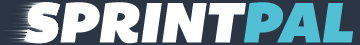
<style>
.page{position:relative;width:360px;height:45px;background:#2b3543}
.page>*{position:absolute;margin:0}
.t1{font:58.1px "BemioItalic";color:#ffffff}
.t2{font:58.1px "BemioItalic";color:#51c0d4}
</style>
<div class="page">
<p class="t1" style="left:24px;top:2px;width:330px;height:42px">SPRINT<span class="t2">PAL</span></p>
</div>
